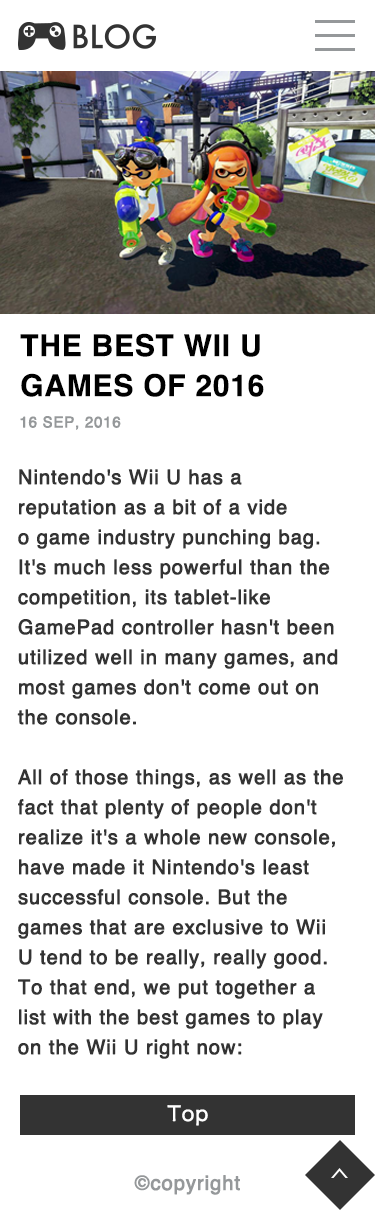
<style>
.page{position:relative;width:375px;height:1210px;background:#ffffff}
.page>*{position:absolute;margin:0}
.t1{font:30px/40px "Helvetica-Bold";letter-spacing:0.025em;color:#000000;text-transform:uppercase}
.t2{font:15px "Helvetica";letter-spacing:0.025em;color:#95989a;font-weight:bold}
.t3{font:20px/30px "Helvetica";letter-spacing:0.025em;color:#333333;font-weight:bold}
.t4{font:20px "HiraKakuProN-W3";letter-spacing:0.025em;color:#ffffff;font-weight:bold}
.t5{font:20px "Helvetica";letter-spacing:0.025em;color:#95989a;font-weight:bold}
</style>
<div class="page">
<p class="t1" style="left:20px;top:333px;width:244px;height:64px">The Best Wii U <br>Games of 2016</p>
<p class="t2" style="left:20px;top:416px;width:101px;height:14px">16 SEP, 2016</p>
<p class="t3" style="left:17px;top:469px;width:326px;height:590px">Nintendo's Wii U has a reputation as a bit of a vide<br>o game industry punching bag. It's much less powerful than the competition, its tablet-like GamePad controller hasn't been utilized well in many games, and most games don't come out on the console.<br><br>All of those things, as well as the fact that plenty of people don't realize it's a whole new console, have made it Nintendo's least successful console. But the games that are exclusive to Wii U tend to be really, really good. To that end, we put together a list with the best games to play on the Wii U right now:</p>
<p class="t4" style="left:167px;top:1105px;width:41px;height:21px">Top</p>
<p class="t5" style="left:134px;top:1175px;width:106px;height:20px">©copyright</p>
</div>
